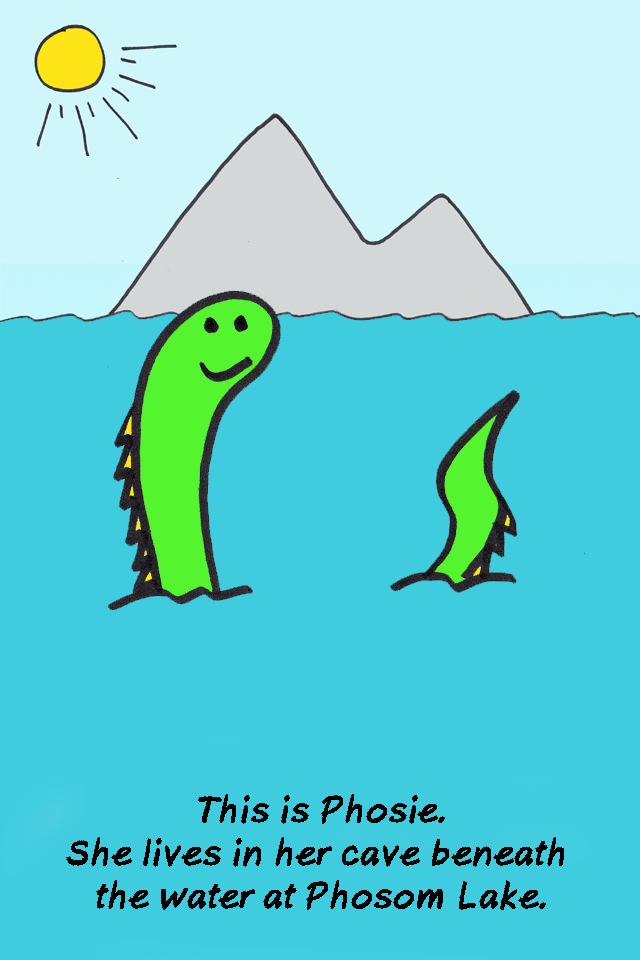
<style>
.page{position:relative;width:640px;height:960px;background:#40ccdf}
.page>*{position:absolute;margin:0}
.t1{font:36px "AxureHandwriting-BoldItalic";color:#000000}
</style>
<div class="page">
<p class="t1" style="left:66px;top:794px;width:498px;height:116px;text-align:center">This is Phosie.<br>She lives in her cave beneath <br>the water at Phosom Lake.</p>
</div>
